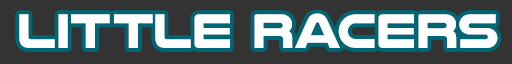
<style>
.page{position:relative;width:512px;height:64px;background:#333333}
.page>*{position:absolute;margin:0}
.t1{font:50px "NulshockRg-Bold";color:#ffffff}
</style>
<div class="page">
<p class="t1" style="left:19px;top:13px;width:479px;height:35px">Little Racers</p>
</div>
